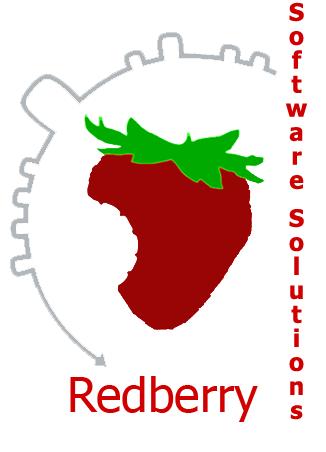
<style>
.page{position:relative;width:326px;height:452px;background:#ffffff}
.page>*{position:absolute;margin:0}
.t1{font:24px "Tahoma-Bold";color:#d00000}
.t2{font:48px "Tahoma";color:#d00000}
</style>
<div class="page">
<p class="t1" style="left:285px;top:2px;width:22px;height:418px">Software  Solutions</p>
<p class="t2" style="left:70px;top:376px;width:188px;height:46px">Redberry</p>
</div>
